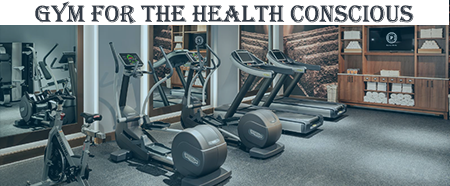
<style>
.page{position:relative;width:450px;height:186px}
.page>*{position:absolute;margin:0}
.t1{font:24.4px "Algerian";color:#313a45}
</style>
<div class="page">
<p class="t1" style="left:35px;top:1px;width:379px;height:23px">GYM FOR THE HEALTH CONSCIOUS</p>
</div>
